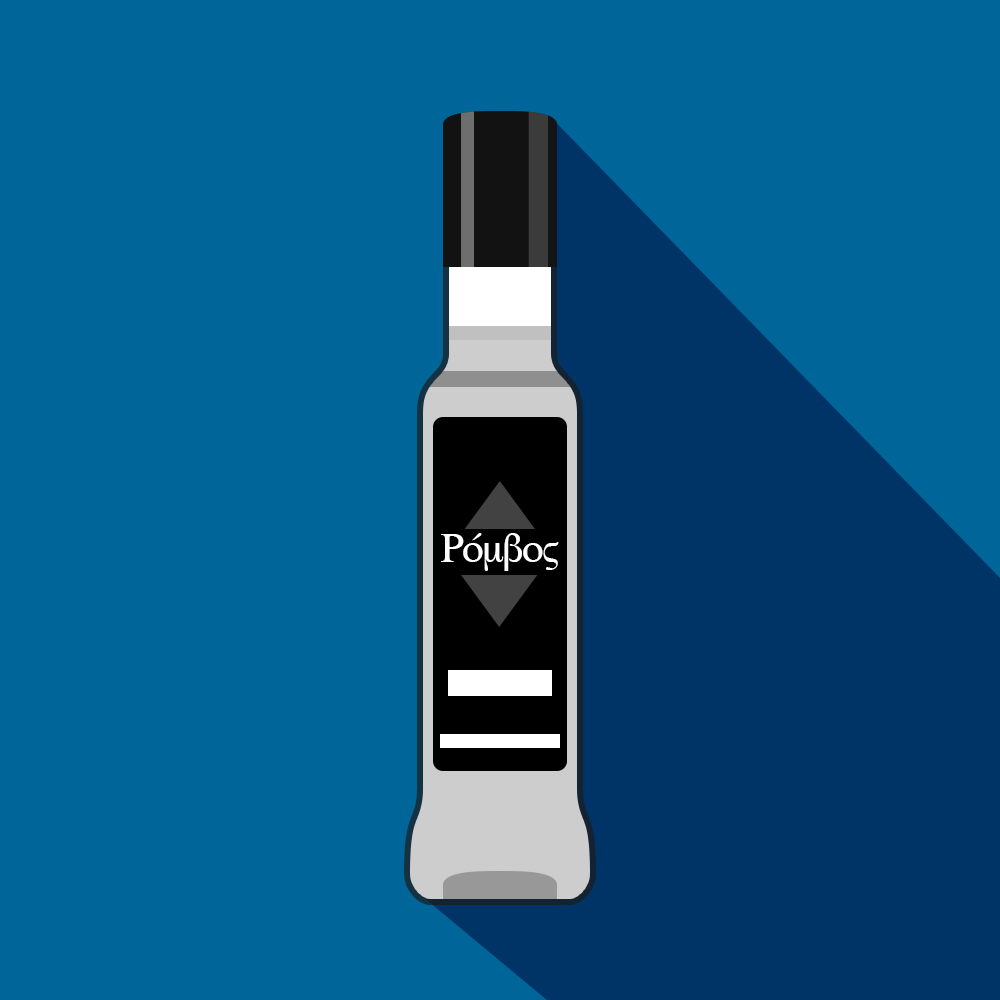
<style>
.page{position:relative;width:1000px;height:1000px;background:#006699}
.page>*{position:absolute;margin:0}
.t1{font:42.4px "UB-Times";letter-spacing:-0.04em;color:#ffffff}
</style>
<div class="page">
<p class="t1" style="left:441px;top:533px;width:118px;height:38px">Ρόμβος</p>
</div>
